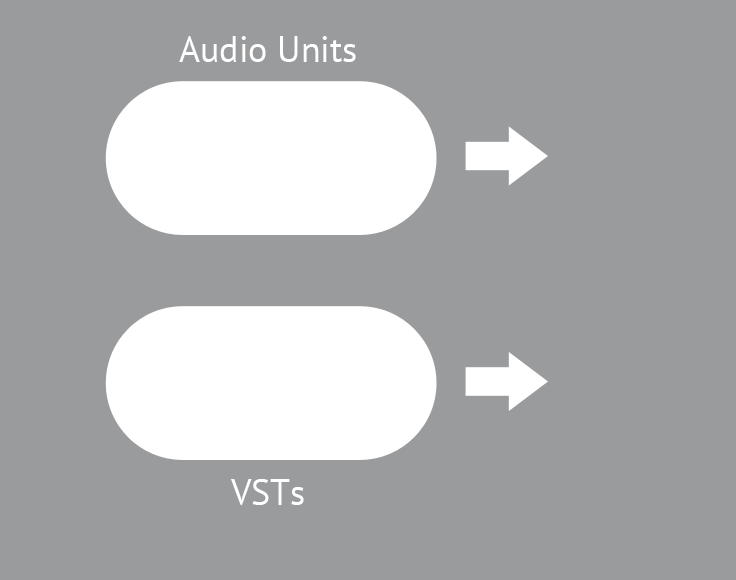
<style>
.page{position:relative;width:736px;height:580px;background:#9a9b9d}
.page>*{position:absolute;margin:0}
.t1{font:36px "PTSans-Regular";color:#ffffff}
</style>
<div class="page">
<p class="t1" style="left:179px;top:36px;width:177px;height:26px">Audio Units</p>
<p class="t1" style="left:230px;top:479px;width:74px;height:26px">VSTs</p>
</div>
